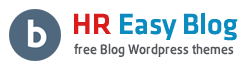
<style>
.page{position:relative;width:250px;height:70px;background:#ffffff}
.page>*{position:absolute;margin:0}
.t1{font:30.1px "UTM-Facebook-K&T";color:#0b8bc0}
.t2{font:30.1px "UTM-Facebook-K&T";color:#da1c1c}
.t3{font:13px "UTM-Daxline-Medium";color:#54575b}
</style>
<div class="page">
<p class="t1" style="left:74px;top:12px;width:164px;height:29px"><span class="t2">HR </span>Easy Blog</p>
<p class="t3" style="left:74px;top:43px;width:160px;height:14px">free Blog Wordpress themes</p>
</div>
